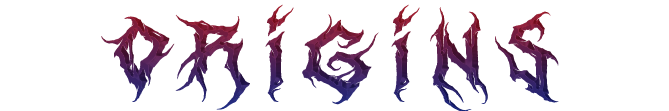
<style>
.page{position:relative;width:669px;height:111px;background:#ffffff}
.page>*{position:absolute;margin:0}
.t1{font:121.4px "Heartless";letter-spacing:0.18em}
</style>
<div class="page">
<p class="t1" style="left:101px;top:4px;width:458px;height:108px">ORIGINS</p>
</div>
